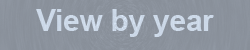
<style>
.page{position:relative;width:250px;height:50px}
.page>*{position:absolute;margin:0}
.t1{font:30px "Arial-BoldMT";letter-spacing:-0.01em;color:#c7d3e2}
</style>
<div class="page">
<p class="t1" style="left:36px;top:9px;width:178px;height:28px">View by year</p>
</div>
